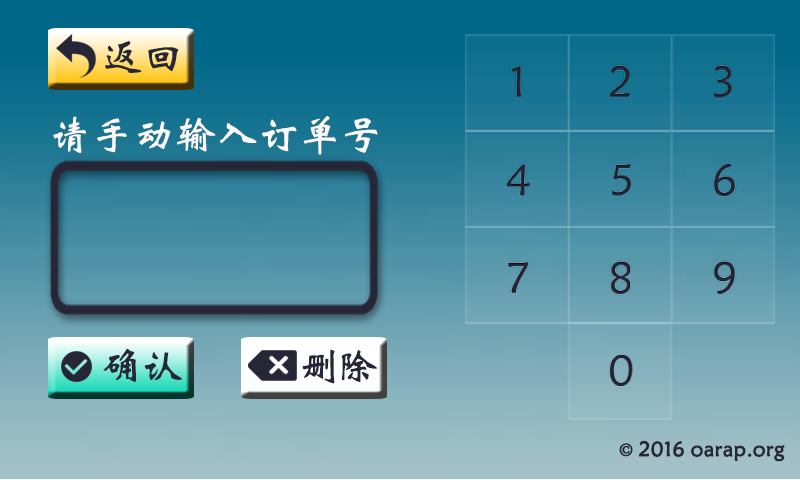
<style>
.page{position:relative;width:800px;height:480px}
.page>*{position:absolute;margin:0}
.t1{font:41.7px "STXinwei";color:#272636}
.t2{font:41.7px "STXinwei";color:#fdf9f9}
.t3{font:41.7px "STXinwei";letter-spacing:-0.14em;color:#272636}
.t4{font:20.8px "STXinwei";color:#272636;font-weight:bold}
.t5{font:20.8px "AdobeSongStd-Light";color:#272636;font-weight:bold}
</style>
<div class="page">
<p class="t1" style="left:105px;top:41px;width:74px;height:32px">返回</p>
<p class="t2" style="left:53px;top:116px;width:325px;height:39px">请手动输入订单号</p>
<p class="t1" style="left:103px;top:348px;width:79px;height:34px">确认</p>
<p class="t3" style="left:302px;top:349px;width:75px;height:35px">删除</p>
<p class="t4" style="left:619px;top:440px;width:166px;height:22px"><span class="t5">© </span>2016 oarap.org</p>
</div>
